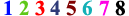
<style>
.page{position:relative;width:129px;height:16px;background:#ffffff}
.page>*{position:absolute;margin:0}
.t1{font:21.2px "TimesNewRomanPS-BoldMT";color:#000cff}
.t2{font:21.2px "TimesNewRomanPS-BoldMT";color:#5fc819}
.t3{font:21.2px "TimesNewRomanPS-BoldMT";color:#ff0000}
.t4{font:21.2px "TimesNewRomanPS-BoldMT";color:#2e3a77}
.t5{font:21.2px "TimesNewRomanPS-BoldMT";color:#810303}
.t6{font:21.2px "TimesNewRomanPS-BoldMT";color:#14b0b6}
.t7{font:21.2px "TimesNewRomanPS-BoldMT";color:#ff00e4}
.t8{font:21.2px "TimesNewRomanPS-BoldMT";color:#000000}
</style>
<div class="page">
<p class="t1" style="left:4px;top:0px;width:8px;height:15px">1</p>
<p class="t2" style="left:19px;top:0px;width:10px;height:15px">2</p>
<p class="t3" style="left:35px;top:0px;width:10px;height:16px">3</p>
<p class="t4" style="left:50px;top:0px;width:10px;height:15px">4</p>
<p class="t5" style="left:66px;top:0px;width:10px;height:16px">5</p>
<p class="t6" style="left:82px;top:0px;width:10px;height:16px">6</p>
<p class="t7" style="left:99px;top:0px;width:11px;height:16px">7</p>
<p class="t8" style="left:115px;top:0px;width:10px;height:16px">8</p>
</div>
